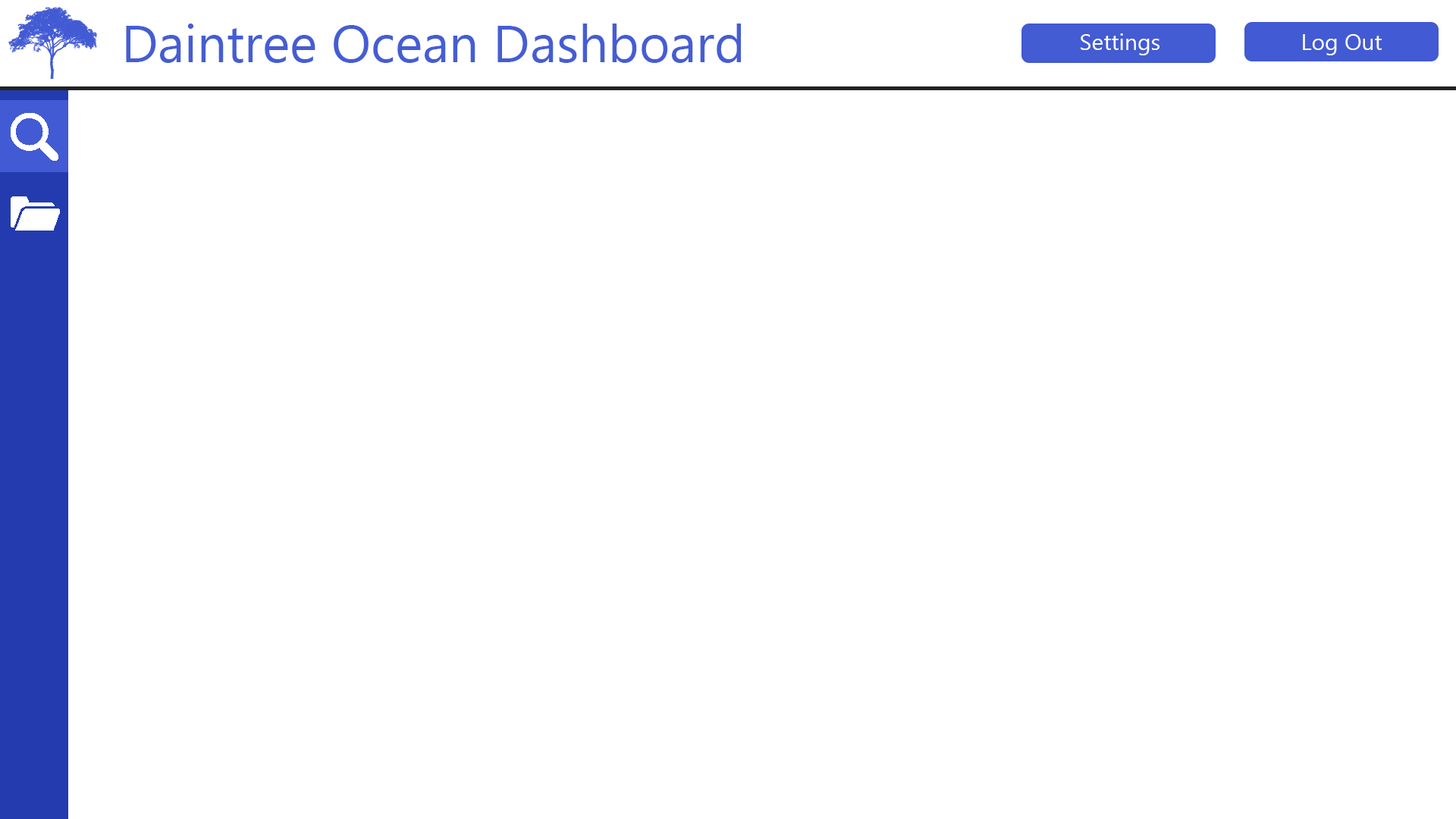
<style>
.page{position:relative;width:1456px;height:819px;background:#ffffff}
.page>*{position:absolute;margin:0}
.t1{font:52.3px "MyanmarText";color:#455dd4}
.t2{font:22.7px "MyanmarText";color:#ffffff}
</style>
<div class="page">
<p class="t1" style="left:126px;top:24px;width:615px;height:39px">Daintree Ocean Dashboard</p>
<p class="t2" style="left:1081px;top:33px;width:78px;height:22px">Settings</p>
<p class="t2" style="left:1303px;top:34px;width:79px;height:21px">Log Out</p>
</div>
